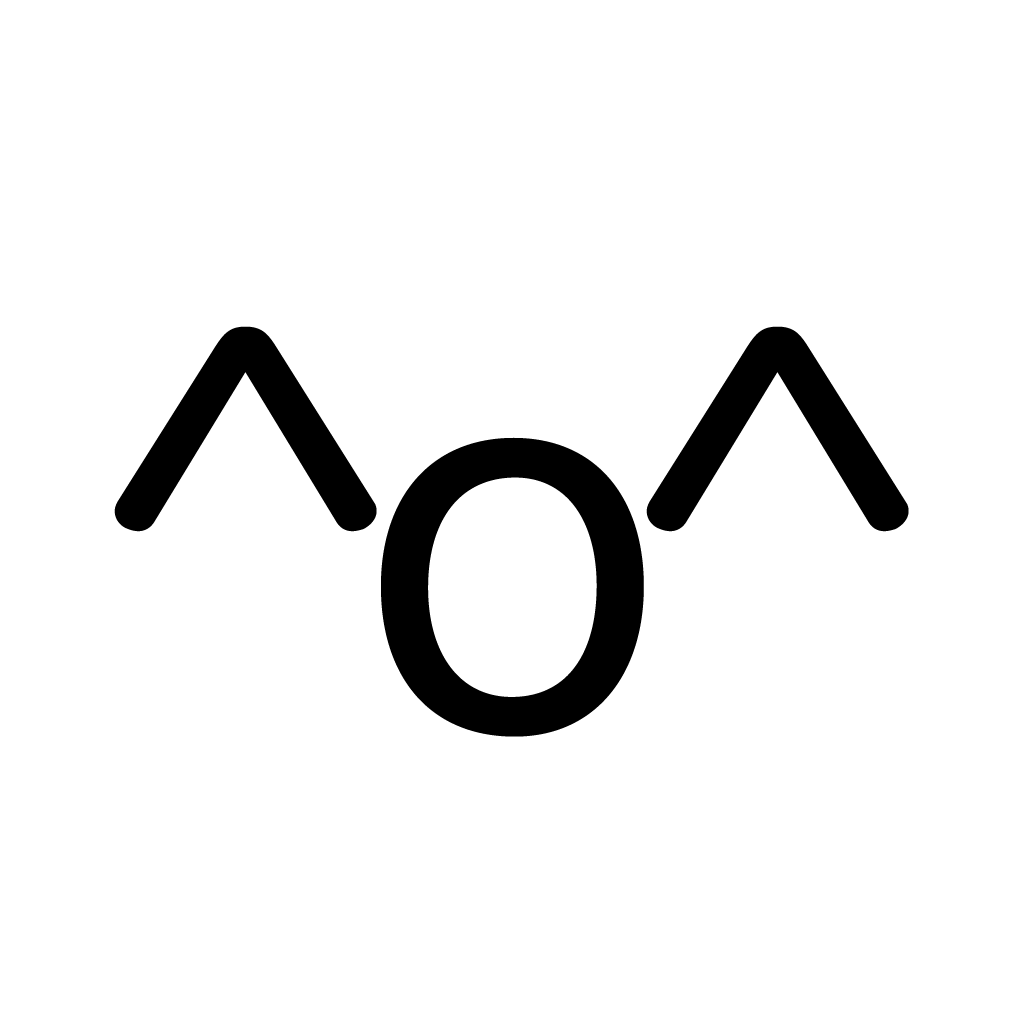
<style>
.page{position:relative;width:1024px;height:1024px;background:#ffffff}
.page>*{position:absolute;margin:0}
.t1{font:512px "HiraMaruPro-W4";color:#000000}
</style>
<div class="page">
<p class="t1" style="left:114px;top:326px;width:795px;height:411px">^o^</p>
</div>
